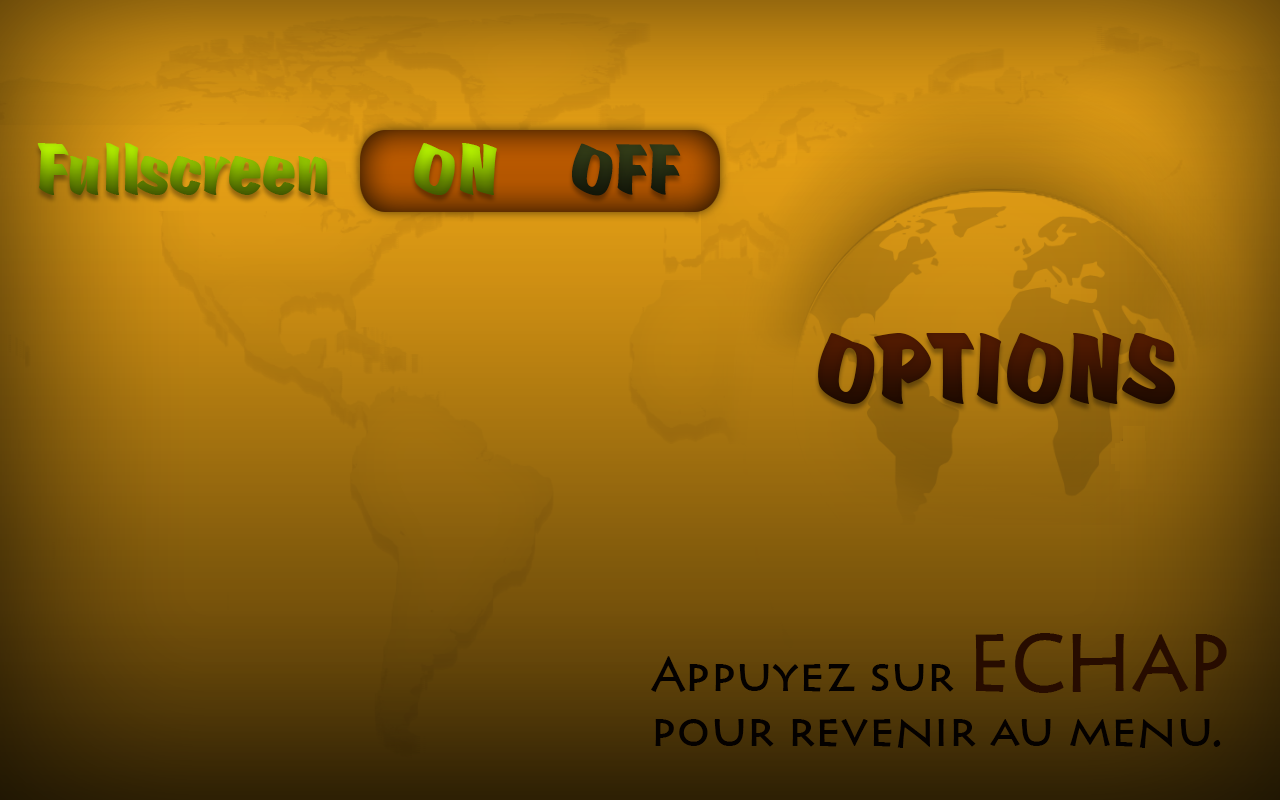
<style>
.page{position:relative;width:1280px;height:800px}
.page>*{position:absolute;margin:0}
.t1{font:75px "Scratch"}
.t2{font:75px "Scratch";color:#343e18}
.t3{font:104.2px "Scratch";color:#3a1301}
.t4{font:45.8px "Pericles";color:#040100}
.t5{font:75px "Pericles";color:#270c00}
</style>
<div class="page">
<p class="t1" style="left:37px;top:143px;width:291px;height:52px">Fullscreen</p>
<p class="t1" style="left:414px;top:143px;width:83px;height:52px">ON</p>
<p class="t2" style="left:572px;top:143px;width:109px;height:53px">OFF</p>
<p class="t3" style="left:818px;top:333px;width:357px;height:71px">OPTIONS</p>
<p class="t4" style="left:651px;top:633px;width:576px;height:115px">Appuyez sur <span class="t5">ECHAP<br></span>pour revenir au menu.</p>
</div>
